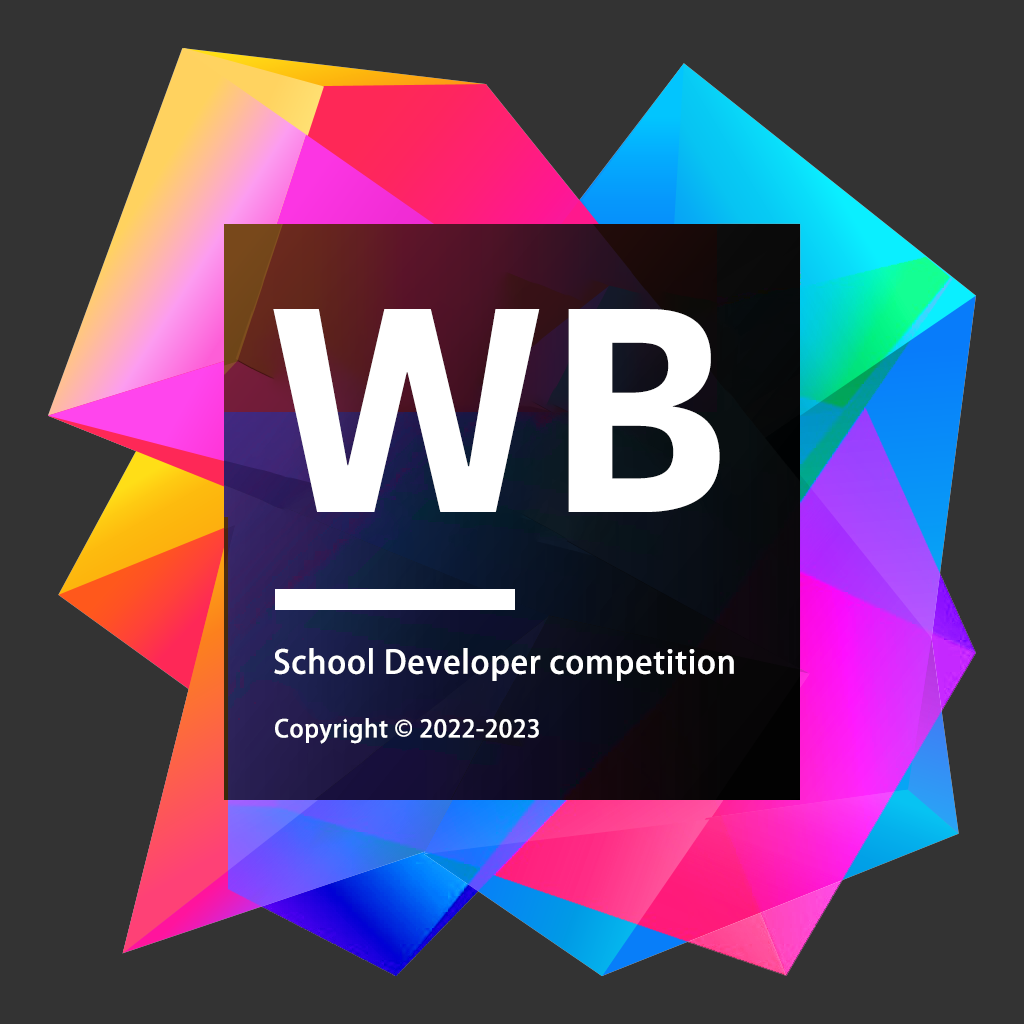
<style>
.page{position:relative;width:1024px;height:1024px;background:#333333}
.page>*{position:absolute;margin:0}
.t1{font:280px "AdelleSansDevanagari-Bold";letter-spacing:0.025em;color:#ffffff}
.t2{font:32px "AdobeHeitiStd-Regular";letter-spacing:0.025em;color:#ffffff}
.t3{font:24px "MyriadPro-Regular";letter-spacing:0.025em;color:#ffffff}
</style>
<div class="page">
<p class="t1" style="left:273px;top:309px;width:447px;height:203px">WB</p>
<p class="t2" style="left:274px;top:648px;width:460px;height:33px">School Developer competition</p>
<p class="t3" style="left:275px;top:718px;width:264px;height:26px">Copyright ©️ 2022-2023</p>
</div>
